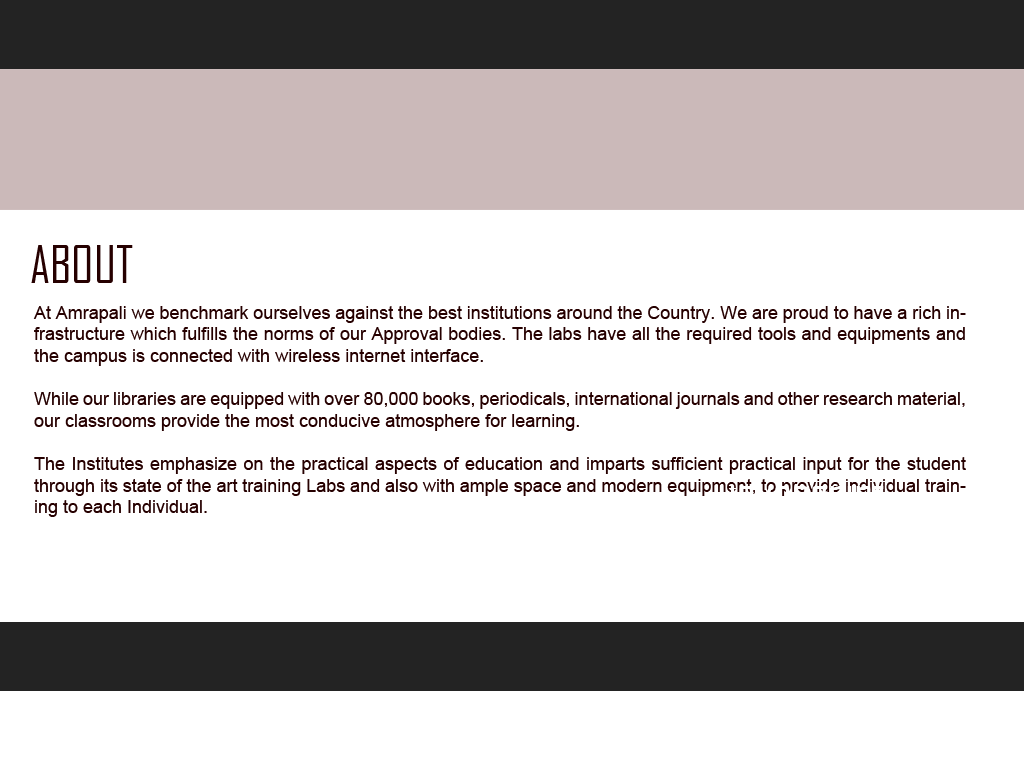
<style>
.page{position:relative;width:1024px;height:768px;background:#ffffff}
.page>*{position:absolute;margin:0}
.t1{font:50px "AgencyFB-Reg";color:#260000}
.t2{font:18px "ArialMT";color:#260000}
</style>
<div class="page">
<p class="t1" style="left:31px;top:245px;width:102px;height:38px">ABOUT</p>
<p class="t2" style="left:33px;top:306px;width:933px;height:211px;text-align:justify">At Amrapali we benchmark ourselves against the best institutions around the Country. We are proud to have a rich infrastructure which fulfills the norms of our Approval bodies. The labs have all the required tools and equipments and the campus is connected with wireless internet interface.<br><br>While our libraries are equipped with over 80,000 books, periodicals, international journals and other research material, our classrooms provide the most conducive atmosphere for learning.<br><br>The Institutes emphasize on the practical aspects of education and imparts sufficient practical input for the student through its state of the art training Labs and also with ample space and modern equipment, to provide individual training to each Individual.</p>
</div>
